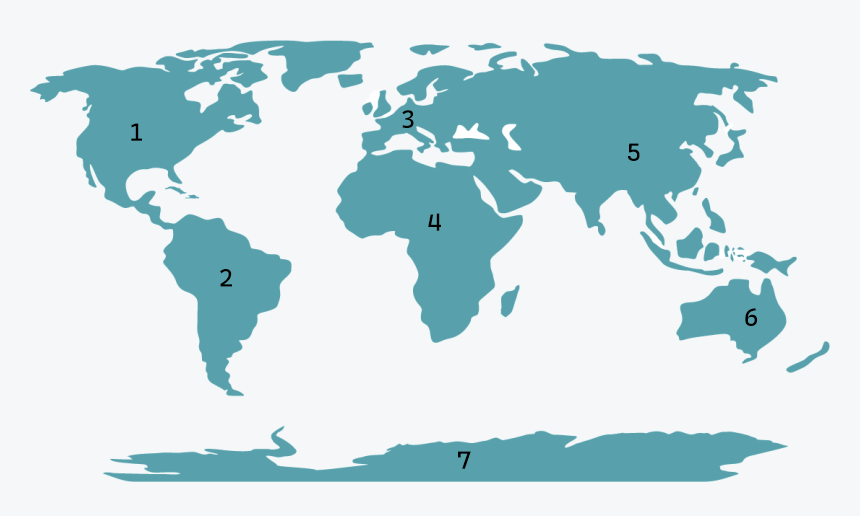
<style>
.page{position:relative;width:860px;height:516px;background:#f5f7f9}
.page>*{position:absolute;margin:0}
.t1{font:25px "CascadiaMono-Regular";color:#000000}
</style>
<div class="page">
<p class="t1" style="left:402px;top:110px;width:12px;height:18px">3</p>
<p class="t1" style="left:131px;top:123px;width:11px;height:18px">1</p>
<p class="t1" style="left:627px;top:143px;width:13px;height:18px">5</p>
<p class="t1" style="left:428px;top:213px;width:13px;height:18px">4</p>
<p class="t1" style="left:220px;top:269px;width:12px;height:18px">2</p>
<p class="t1" style="left:745px;top:308px;width:12px;height:18px">6</p>
<p class="t1" style="left:458px;top:451px;width:13px;height:18px">7</p>
</div>
